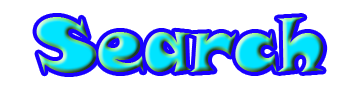
<style>
.page{position:relative;width:360px;height:90px;background:#ffffff}
.page>*{position:absolute;margin:0}
.t1{font:74.3px "SnapITC-Regular"}
</style>
<div class="page">
<p class="t1" style="left:36px;top:17px;width:288px;height:56px">Search</p>
</div>
